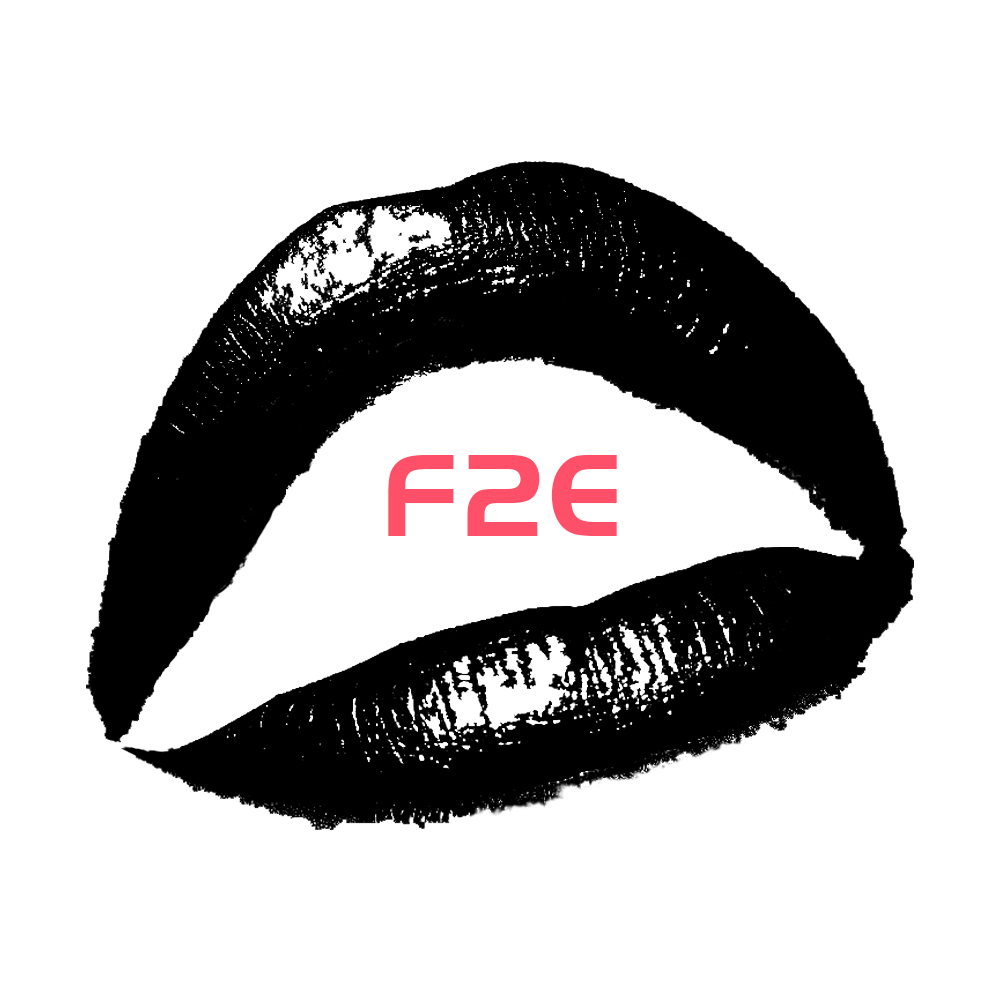
<style>
.page{position:relative;width:1000px;height:1000px;background:#ffffff}
.page>*{position:absolute;margin:0}
.t1{font:121px "PangMenZhengDao";letter-spacing:0.04em;color:#ff5069}
</style>
<div class="page">
<p class="t1" style="left:388px;top:455px;width:229px;height:81px">F2E</p>
</div>
